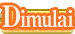
<style>
.page{position:relative;width:75px;height:34px;background:#f6701d}
.page>*{position:absolute;margin:0}
.t1{font:23px "RyuminPro-ExBold";letter-spacing:-0.08em;color:#fff5f0;scale:0.9 1}
.t2{font:29px "RyuminPro-ExBold";letter-spacing:-0.08em;color:#fff5f0;scale:0.9 1}
</style>
<div class="page">
<p class="t1" style="left:2px;top:5px;width:72px;height:22px"><span class="t2">D</span>imulai</p>
</div>
